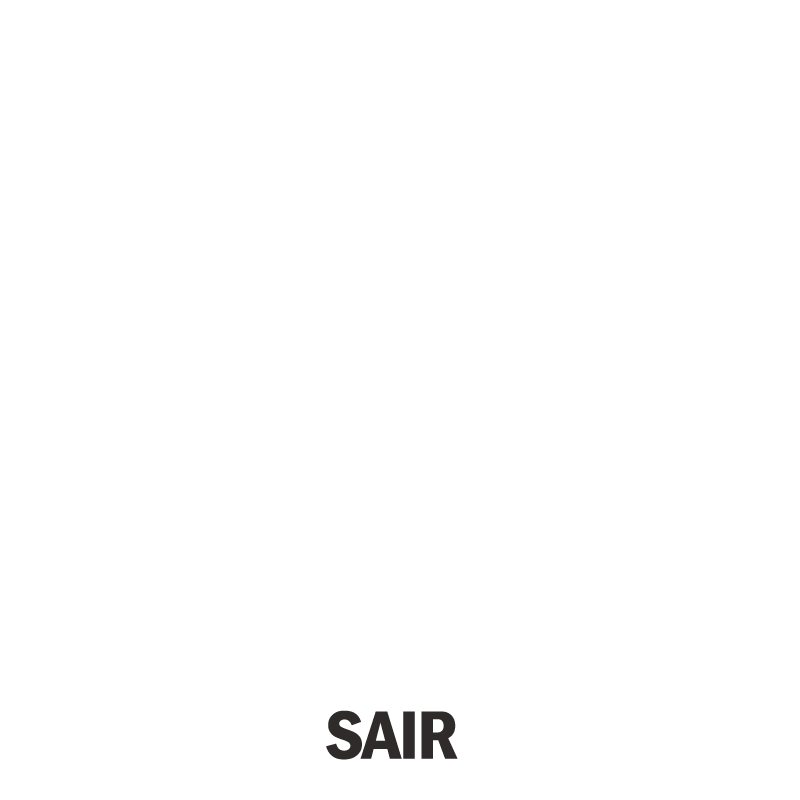
<style>
.page{position:relative;width:800px;height:800px;background:#ffffff}
.page>*{position:absolute;margin:0}
.t1{font:120.9px "FranklinGothic-DemiCond";letter-spacing:-0.06em;color:#302b2b;font-weight:bold;scale:1.08 1}
</style>
<div class="page">
<p class="t1" style="left:326px;top:710px;width:132px;height:50px">SAIR</p>
</div>
